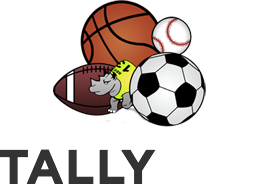
<style>
.page{position:relative;width:262px;height:185px;background:#ffffff}
.page>*{position:absolute;margin:0}
.t1{font:48px "Gotham-Bold";letter-spacing:0.025em;color:#333333}
.t2{font:48px "Gotham-Bold";letter-spacing:0.025em;color:#ffffff}
</style>
<div class="page">
<p class="t1" style="left:0px;top:149px;width:260px;height:36px">TALLY<span class="t2">REC</span></p>
</div>
